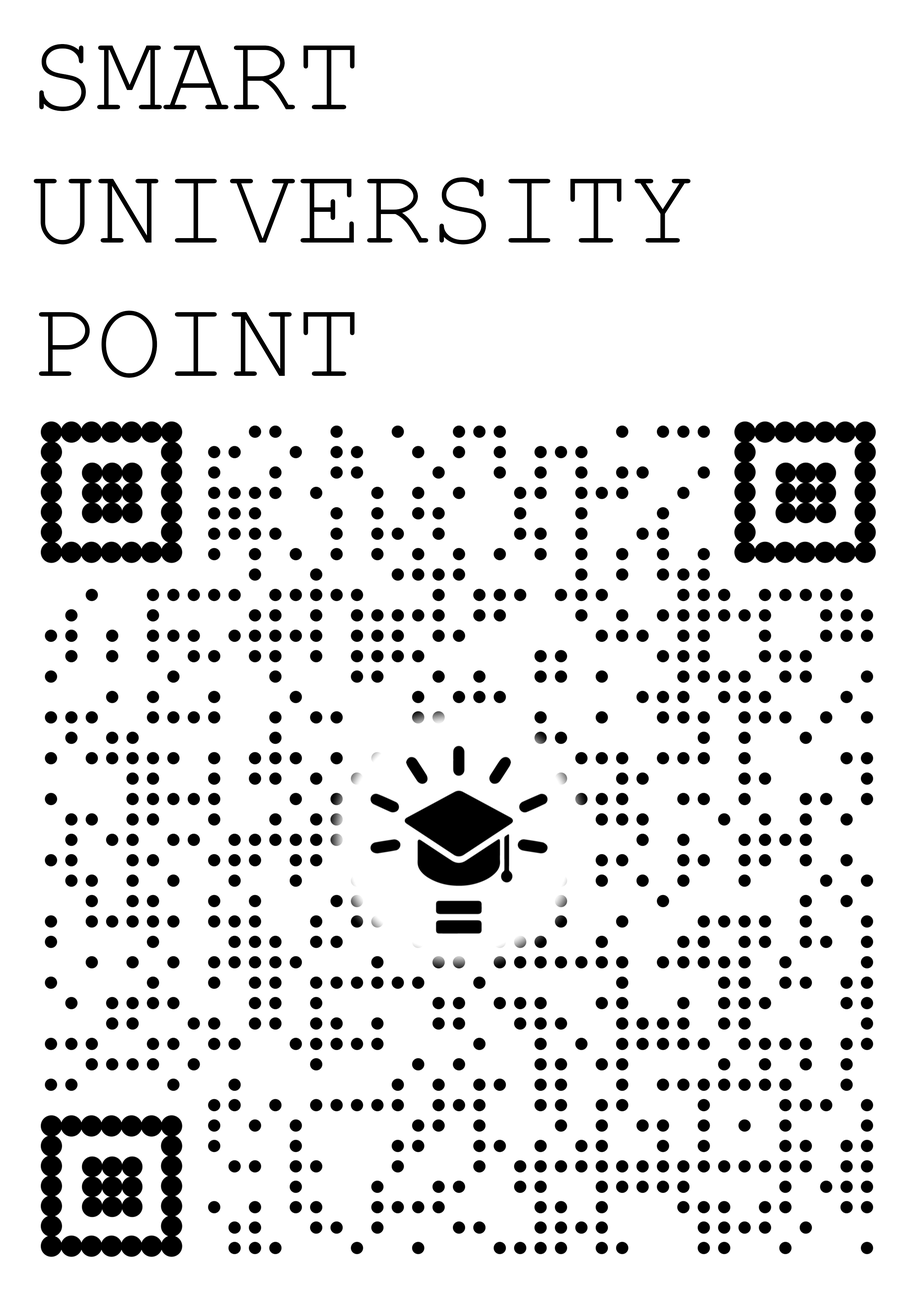
<style>
.page{position:relative;width:918px;height:1299px;background:#ffffff}
.page>*{position:absolute;margin:0}
.t1{font:111.1px "CourierNewPSMT";color:#000000}
</style>
<div class="page">
<p class="t1" style="left:34px;top:44px;width:657px;height:334px">SMART <br>UNIVERSITY <br>POINT</p>
</div>
